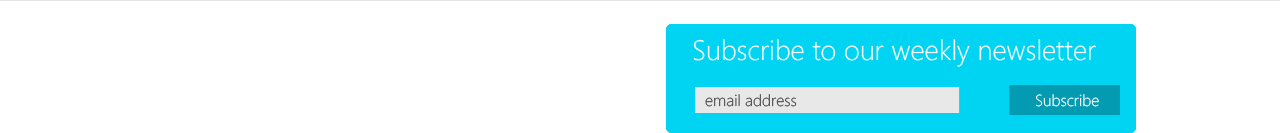
<style>
.page{position:relative;width:1280px;height:133px;background:#ffffff}
.page>*{position:absolute;margin:0}
.t1{font:28px "SegoeWP-Light";color:#ffffff}
.t2{font:16px "SegoeWPN-Light";color:#4f4f4f}
.t3{font:16px "SegoeWPN-Light";color:#ffffff}
</style>
<div class="page">
<p class="t1" style="left:693px;top:39px;width:403px;height:28px">Subscribe to our weekly newsletter</p>
<p class="t2" style="left:705px;top:94px;width:92px;height:13px">email address</p>
<p class="t3" style="left:1035px;top:94px;width:64px;height:13px">Subscribe</p>
</div>
